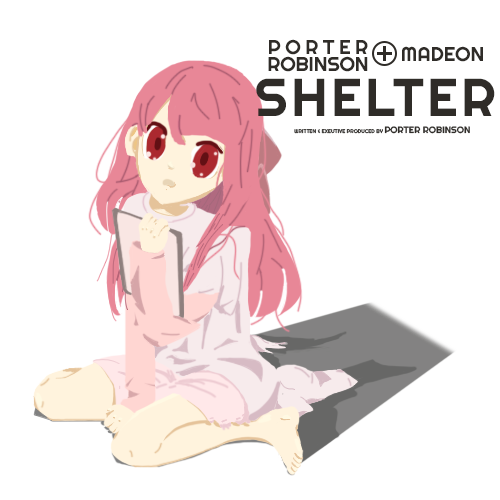
<style>
.page{position:relative;width:500px;height:500px;background:#ffffff}
.page>*{position:absolute;margin:0}
.t1{font:20px/17.3px "Righteous-Regular";letter-spacing:-0.01em;color:#2f2c28}
.t2{font:20px/17.3px "Righteous-Regular";letter-spacing:0.23em;color:#2f2c28}
.t3{font:20px "Righteous-Regular";color:#2f2c28}
.t4{font:53.3px "Righteous-Regular";letter-spacing:0.06em;color:#2f2c28}
.t5{font:5.3px "Righteous-Regular";letter-spacing:-0.005em;color:#2f2c28}
.t6{font:9.3px "Righteous-Regular";letter-spacing:-0.005em;color:#2f2c28}
</style>
<div class="page">
<p class="t1" style="left:268px;top:39px;width:100px;height:33px;text-align:center"><span class="t2">PORTER<br></span>ROBINSON</p>
<p class="t3" style="left:402px;top:46px;width:81px;height:16px">MADEON</p>
<p class="t4" style="left:256px;top:78px;width:239px;height:38px">SHELTER</p>
<p class="t5" style="left:294px;top:126px;width:176px;height:8px">WRITTEN &amp; EXEUTIVE PRODUCED BY <span class="t6">PORTER ROBINSON</span></p>
</div>
